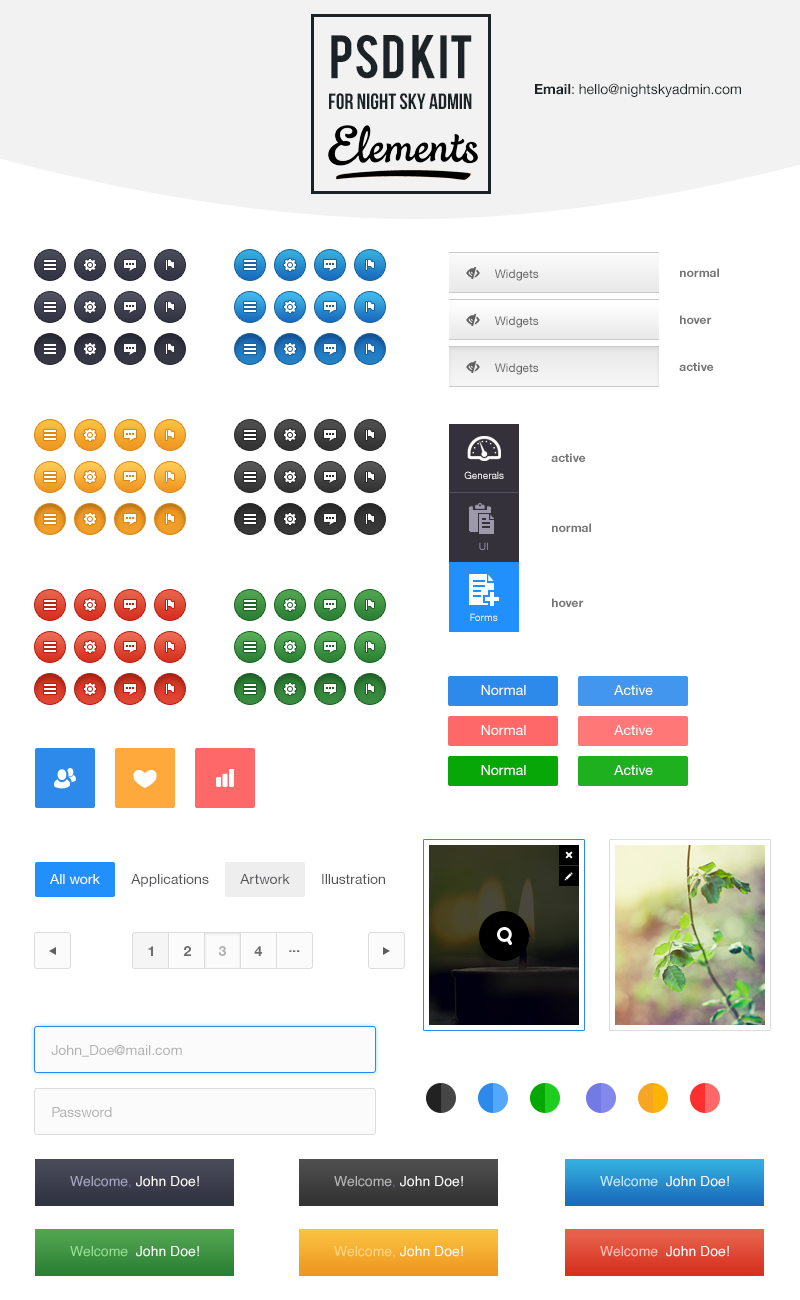
<style>
.page{position:relative;width:800px;height:1300px;background:#ffffff}
.page>*{position:absolute;margin:0}
.t1{font:48px "Bebas";color:#1c2326}
.t2{font:14px "HelveticaNeue";color:#1c2326}
.t3{font:14px "HelveticaNeue-Bold";color:#1c2326}
.t4{font:22px "BebasNeue";color:#1c2326}
.t5{font:12px "HelveticaNeueCE-Roman";color:#747474}
.t6{font:12px "HelveticaNeueCE-Bold";color:#747474}
.t7{font:10px "HelveticaNeueCE-Roman"}
.t8{font:14px "HelveticaNeueCE-Roman";color:#ffffff}
.t9{font:14px "HelveticaNeueCE-Roman";color:#535457}
.t10{font:14px "HelveticaNeueCE-Bold";color:#5f5f5f}
.t11{font:14px "HelveticaNeueCE-Bold";color:#b2b2b2}
.t12{font:14px "HelveticaNeueCE-Roman";color:#9c9c9c}
.t13{font:14px "HelveticaNeueCE-Roman";color:#b2b2b2}
.t14{font:14px "Helvetica";color:#ffffff}
.t15{font:14px "Helvetica";color:#a4a6c2}
.t16{font:14px "Helvetica";color:#6b6e95}
.t17{font:14px "Helvetica";color:#b7b7b7}
.t18{font:14px "Helvetica";color:#c1edff}
.t19{font:14px "Helvetica";color:#96df95}
.t20{font:14px "Helvetica";color:#ffd885}
.t21{font:14px "Helvetica";color:#ffc3b9}
</style>
<div class="page">
<p class="t1" style="left:331px;top:35px;width:141px;height:44px">PSD KIT</p>
<p class="t2" style="left:535px;top:83px;width:206px;height:14px"><span class="t3">Email</span>: hello@nightskyadmin.com</p>
<p class="t4" style="left:329px;top:93px;width:143px;height:17px">FOR NIGHT SKY ADMIN</p>
<p class="t5" style="left:495px;top:269px;width:44px;height:12px">Widgets</p>
<p class="t6" style="left:680px;top:268px;width:39px;height:9px">normal</p>
<p class="t5" style="left:495px;top:316px;width:44px;height:12px">Widgets</p>
<p class="t6" style="left:680px;top:315px;width:32px;height:9px">hover</p>
<p class="t5" style="left:495px;top:363px;width:44px;height:12px">Widgets</p>
<p class="t6" style="left:679px;top:362px;width:35px;height:9px">active</p>
<p class="t6" style="left:551px;top:453px;width:35px;height:9px">active</p>
<p class="t7" style="left:464px;top:471px;width:40px;height:8px">Generals</p>
<p class="t6" style="left:552px;top:523px;width:39px;height:9px">normal</p>
<p class="t7" style="left:479px;top:542px;width:9px;height:8px">UI</p>
<p class="t6" style="left:552px;top:598px;width:32px;height:9px">hover</p>
<p class="t7" style="left:470px;top:613px;width:28px;height:8px">Forms</p>
<p class="t8" style="left:481px;top:685px;width:45px;height:10px">Normal</p>
<p class="t8" style="left:614px;top:685px;width:39px;height:10px">Active</p>
<p class="t8" style="left:481px;top:725px;width:45px;height:10px">Normal</p>
<p class="t8" style="left:614px;top:725px;width:39px;height:10px">Active</p>
<p class="t8" style="left:481px;top:765px;width:45px;height:10px">Normal</p>
<p class="t8" style="left:614px;top:765px;width:39px;height:10px">Active</p>
<p class="t9" style="left:50px;top:874px;width:335px;height:13px"><span class="t8">All work        </span>Applications        Artwork        Illustration</p>
<p class="t10" style="left:148px;top:946px;width:5px;height:10px">1</p>
<p class="t10" style="left:183px;top:946px;width:8px;height:10px">2</p>
<p class="t11" style="left:218px;top:946px;width:8px;height:10px">3</p>
<p class="t10" style="left:254px;top:946px;width:8px;height:10px">4</p>
<p class="t10" style="left:289px;top:950px;width:11px;height:2px">...</p>
<p class="t12" style="left:51px;top:1045px;width:131px;height:12px">John_Doe@mail.com</p>
<p class="t13" style="left:52px;top:1107px;width:60px;height:10px">Password</p>
<p class="t14" style="left:70px;top:1176px;width:129px;height:12px"><span class="t15">Welcome</span><span class="t16">, </span>John Doe!</p>
<p class="t14" style="left:334px;top:1176px;width:129px;height:12px"><span class="t17">Welcome</span><span class="t16">, </span>John Doe!</p>
<p class="t14" style="left:600px;top:1176px;width:129px;height:12px"><span class="t18">Welcome</span><span class="t16">, </span>John Doe!</p>
<p class="t14" style="left:70px;top:1246px;width:129px;height:12px"><span class="t19">Welcome</span><span class="t16">, </span>John Doe!</p>
<p class="t14" style="left:334px;top:1246px;width:129px;height:12px"><span class="t20">Welcome, </span>John Doe!</p>
<p class="t14" style="left:600px;top:1246px;width:129px;height:12px"><span class="t21">Welcome</span><span class="t16">, </span>John Doe!</p>
</div>
